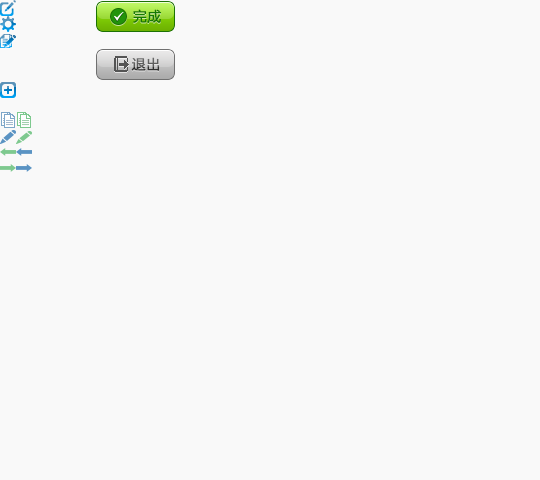
<style>
.page{position:relative;width:540px;height:480px;background:#f9f9f9}
.page>*{position:absolute;margin:0}
.t1{font:14px "FZLTHJW--GB1-0";color:#167902;font-weight:bold}
.t2{font:14px "FZLTHJW--GB1-0";color:#2f2f2e;font-weight:bold}
</style>
<div class="page">
<p class="t1" style="left:133px;top:9px;width:29px;height:14px">完成</p>
<p class="t2" style="left:131px;top:57px;width:29px;height:14px">退出</p>
</div>
